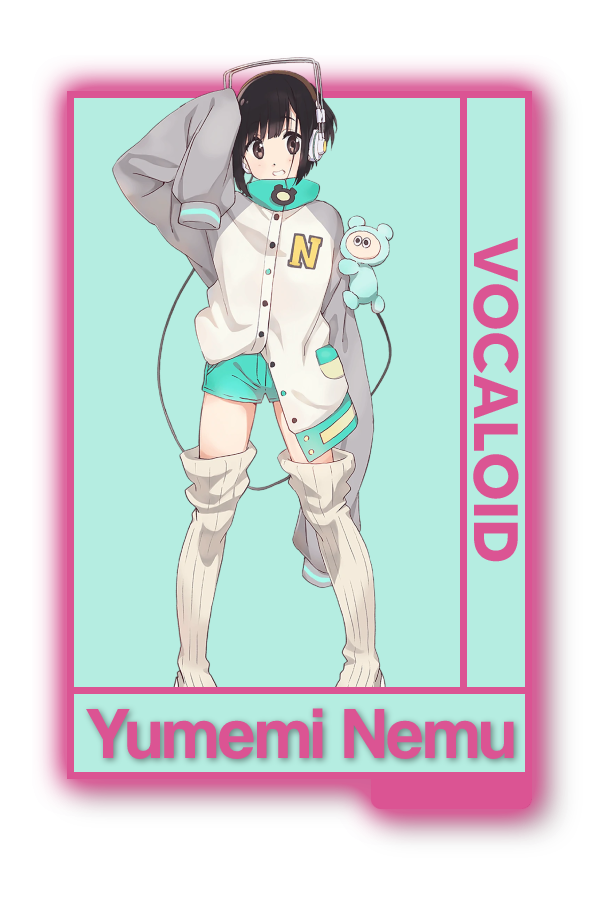
<style>
.page{position:relative;width:600px;height:900px;background:#b5ede1}
.page>*{position:absolute;margin:0}
.t1{font:62.5px "MADETOMMY-Bold";color:#db5493}
.t2{font:73.8px "CoolveticaRg-Regular";color:#db5493}
</style>
<div class="page">
<p class="t1" style="left:473px;top:237px;width:46px;height:325px;rotate:90deg">VOCALOID</p>
<p class="t2" style="left:86px;top:708px;width:428px;height:51px">Yumemi Nemu</p>
</div>
